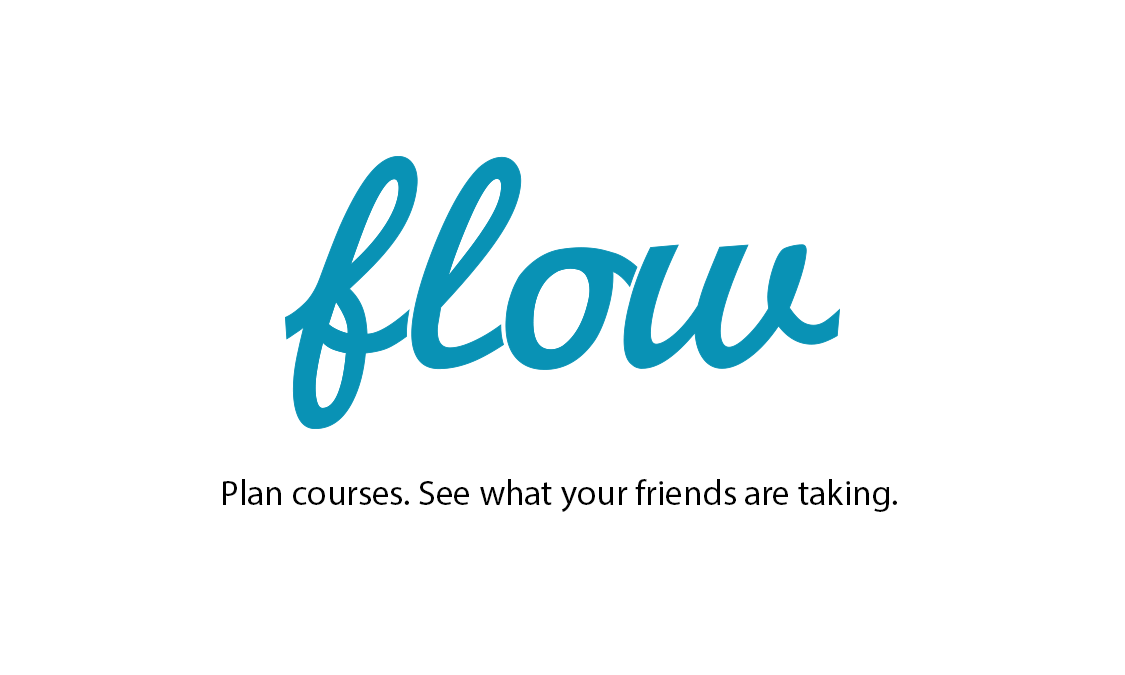
<style>
.page{position:relative;width:1125px;height:675px;background:#ffffff}
.page>*{position:absolute;margin:0}
.t1{font:35.4px "MyriadPro-Regular";color:#000000}
</style>
<div class="page">
<p class="t1" style="left:223px;top:479px;width:674px;height:33px">Plan courses. See what your friends are taking.</p>
</div>
